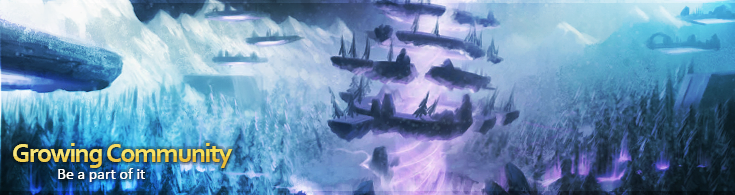
<style>
.page{position:relative;width:735px;height:195px}
.page>*{position:absolute;margin:0}
.t1{font:27px "Corbel-Bold";letter-spacing:-0.05em;color:#eecd51}
.t2{font:16px "Calibri";color:#ffffff}
</style>
<div class="page">
<p class="t1" style="left:13px;top:143px;width:220px;height:25px">Growing Community</p>
<p class="t1" style="left:13px;top:143px;width:220px;height:25px">Growing Community</p>
<p class="t2" style="left:58px;top:168px;width:87px;height:14px">Be a part of it</p>
<p class="t2" style="left:58px;top:168px;width:87px;height:14px">Be a part of it</p>
</div>
